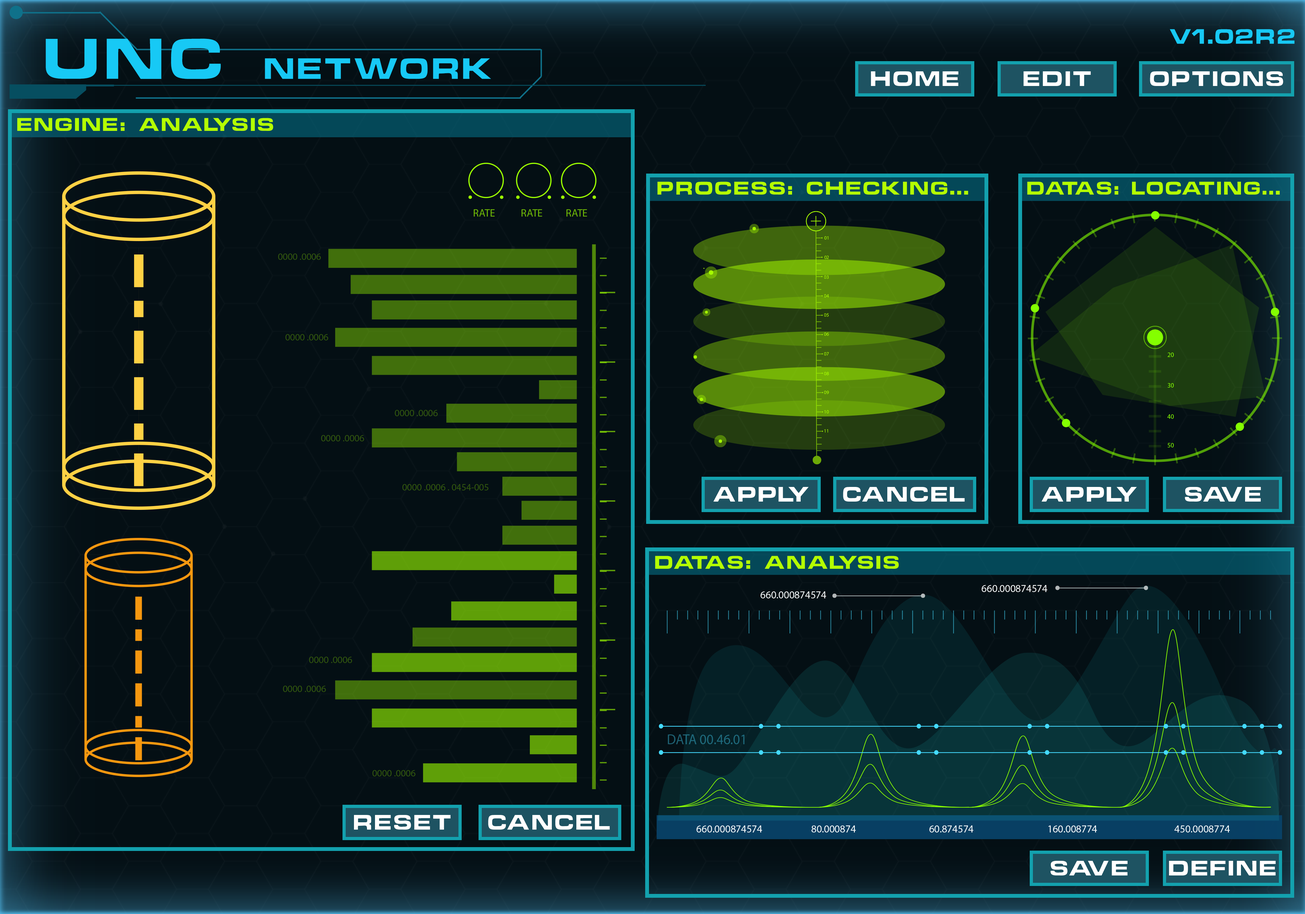
<style>
.page{position:relative;width:1305px;height:914px;background:#040f14}
.page>*{position:absolute;margin:0}
.t1{font:19.1px "ChinoCapsSSK";letter-spacing:0.12em;color:#17c9f5}
.t2{font:26.9px "ChinoCapsSSK";letter-spacing:0.12em;color:#17c9f5}
.t3{font:52.4px "ChinoCapsSSK";letter-spacing:0.12em;color:#17c9f5}
.t4{font:19.2px "ChinoCapsSSK";letter-spacing:0.12em;color:#ffffff}
.t5{font:16.8px "ChinoCapsSSK";letter-spacing:0.12em;color:#b4ff00}
.t6{font:16.8px "ChinoCapsSSK";letter-spacing:0.12em;color:#b4ff00;scale:0.96 1}
.t7{font:19.2px "ChinoCapsSSK";letter-spacing:0.1em;color:#ffffff}
</style>
<div class="page">
<p class="t1" style="left:1169px;top:29px;width:125px;height:15px">V1.02R2</p>
<p class="t2" style="left:46px;top:39px;width:445px;height:40px"><span class="t3">UNC </span>NETWORK</p>
<p class="t4" style="left:870px;top:71px;width:88px;height:15px">HOME</p>
<p class="t4" style="left:1023px;top:71px;width:68px;height:15px">EDIT</p>
<p class="t4" style="left:1149px;top:71px;width:134px;height:15px">OPTIONS</p>
<p class="t5" style="left:17px;top:118px;width:256px;height:13px">ENGINE: ANALYSIS</p>
<p class="t5" style="left:657px;top:182px;width:311px;height:13px">PROCESS: CHECKING...</p>
<p class="t6" style="left:1027px;top:182px;width:252px;height:13px">DATAS: LOCATING...</p>
<p class="t4" style="left:713px;top:487px;width:95px;height:15px">APPLY</p>
<p class="t4" style="left:843px;top:487px;width:121px;height:15px">CANCEL</p>
<p class="t4" style="left:1041px;top:487px;width:95px;height:15px">APPLY</p>
<p class="t7" style="left:1184px;top:487px;width:77px;height:15px">SAVE</p>
<p class="t5" style="left:655px;top:556px;width:243px;height:13px">DATAS: ANALYSIS</p>
<p class="t4" style="left:354px;top:815px;width:96px;height:15px">RESET</p>
<p class="t4" style="left:488px;top:815px;width:122px;height:15px">CANCEL</p>
<p class="t4" style="left:1050px;top:861px;width:77px;height:15px">SAVE</p>
<p class="t4" style="left:1169px;top:861px;width:106px;height:15px">DEFINE</p>
</div>
